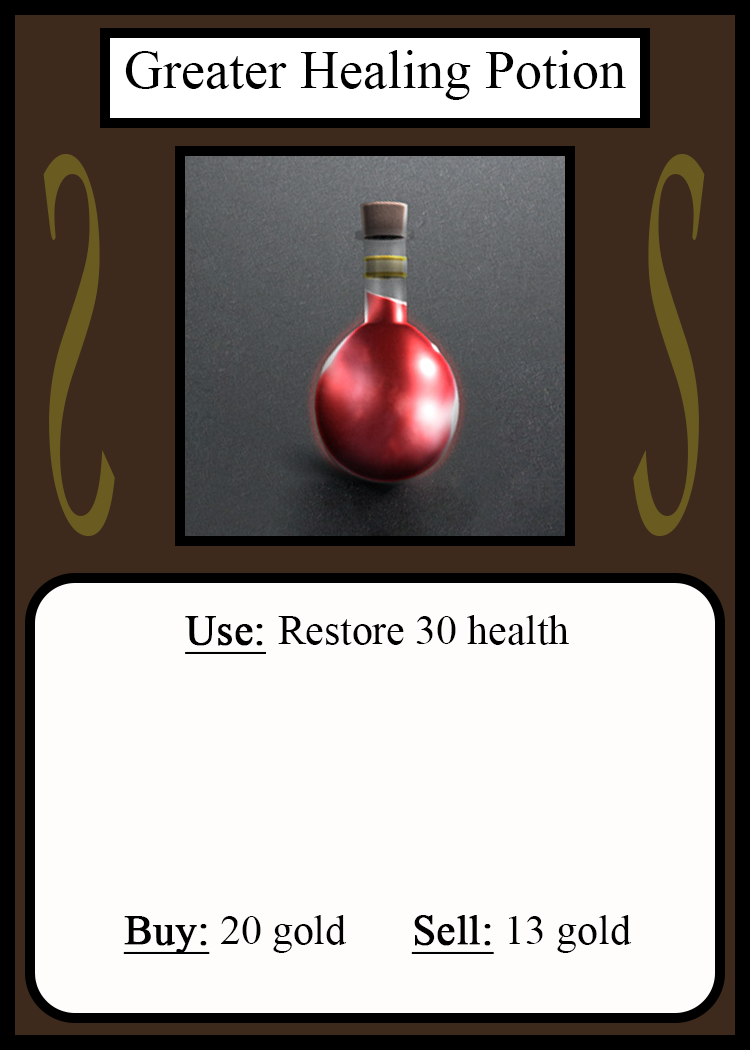
<style>
.page{position:relative;width:750px;height:1050px;background:#fffcfc}
.page>*{position:absolute;margin:0}
.t1{font:54.2px "TimesNewRomanPSMT";color:#010101}
.t2{font:548.5px "Apple-Chancery";color:#6a5c21;scale:0.27 1}
.t3{font:548.2px "Apple-Chancery";color:#6a5c21;scale:0.27 1}
.t4{font:41.7px "TimesNewRomanPSMT";color:#000000}
.t5{font:41.7px "TimesNewRomanPSMT";color:#000000;font-weight:bold;text-decoration:underline}
</style>
<div class="page">
<p class="t1" style="left:125px;top:50px;width:501px;height:50px">Greater Healing Potion</p>
<p class="t2" style="left:43px;top:154px;width:72px;height:382px;rotate:180deg">S</p>
<p class="t3" style="left:633px;top:154px;width:72px;height:382px">S</p>
<p class="t4" style="left:123px;top:615px;width:509px;height:339px;text-align:center"><span class="t5">Use: </span>Restore 30 health<br><br><br><br><br><br><span class="t5">Buy:</span> 20 gold   <span class="t5">Sell:</span> 13 gold</p>
</div>
